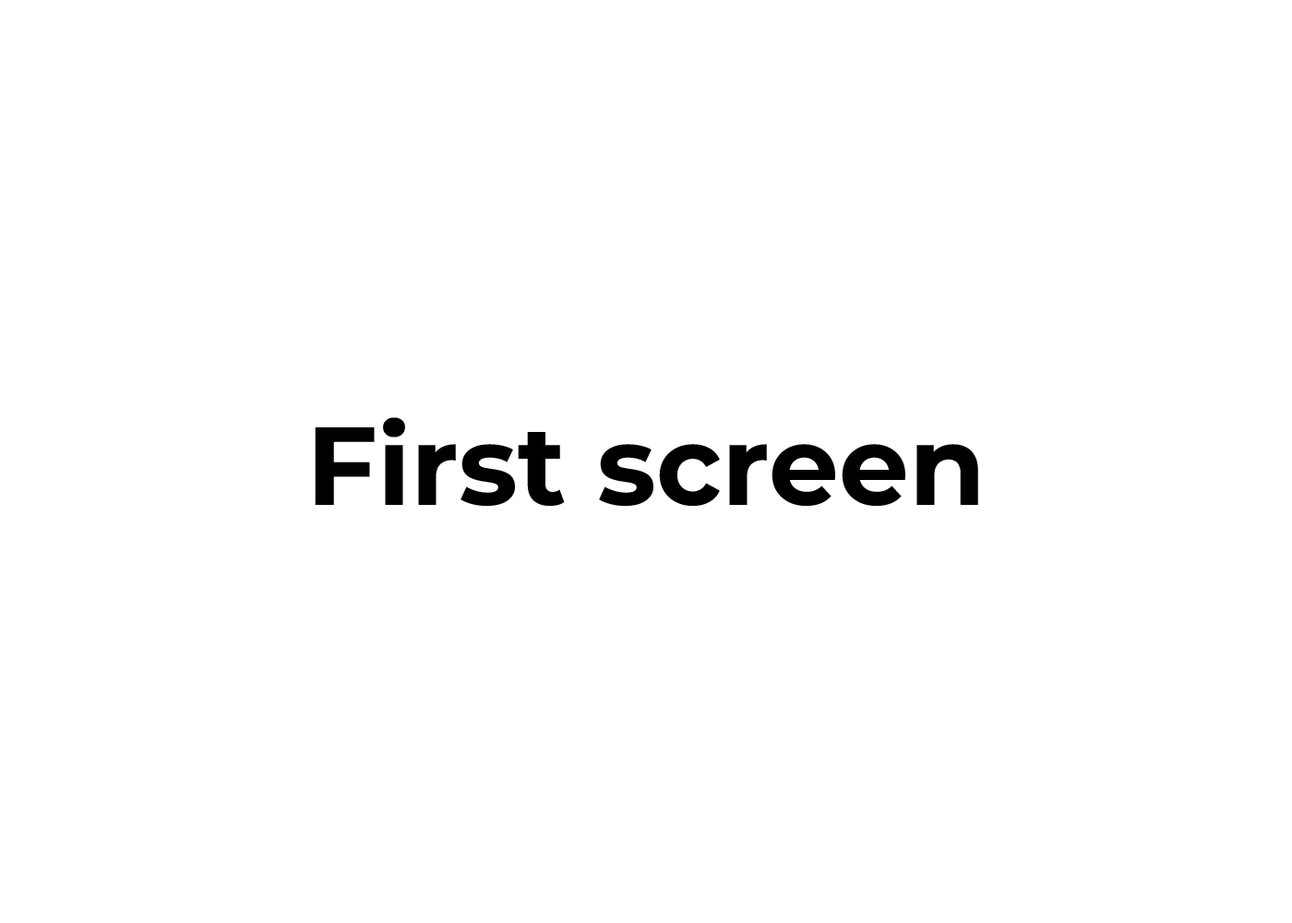
<style>
.page{position:relative;width:1292px;height:923px;background:#ffffff}
.page>*{position:absolute;margin:0}
.t1{font:110.7px "Montserrat-Bold";color:#000000}
</style>
<div class="page">
<p class="t1" style="left:315px;top:417px;width:663px;height:89px">First screen</p>
</div>
